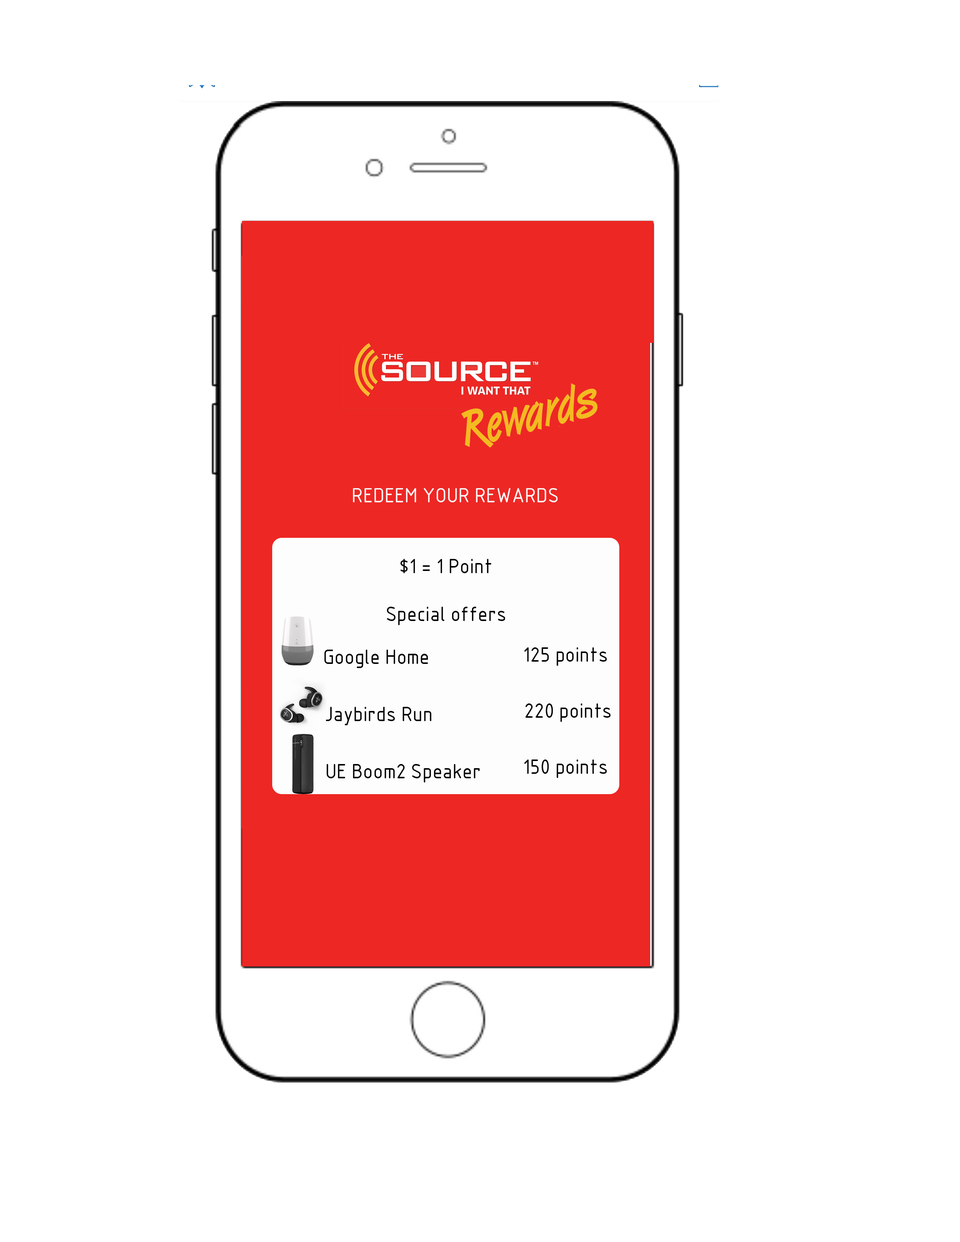
<style>
.page{position:relative;width:960px;height:1242px;background:#ffffff}
.page>*{position:absolute;margin:0}
.t1{font:20px "GOST-Common";color:#000000}
</style>
<div class="page">
<p class="t1" style="left:400px;top:559px;width:91px;height:14px">$1 = 1 Point</p>
<p class="t1" style="left:387px;top:607px;width:118px;height:18px">Special offers</p>
<p class="t1" style="left:324px;top:650px;width:104px;height:18px">Google Home</p>
<p class="t1" style="left:524px;top:647px;width:83px;height:19px">125 points</p>
<p class="t1" style="left:326px;top:707px;width:105px;height:18px">Jaybirds Run</p>
<p class="t1" style="left:525px;top:704px;width:86px;height:18px">220 points</p>
<p class="t1" style="left:524px;top:760px;width:83px;height:18px">150 points</p>
<p class="t1" style="left:326px;top:764px;width:154px;height:19px">UE Boom2 Speaker</p>
</div>
